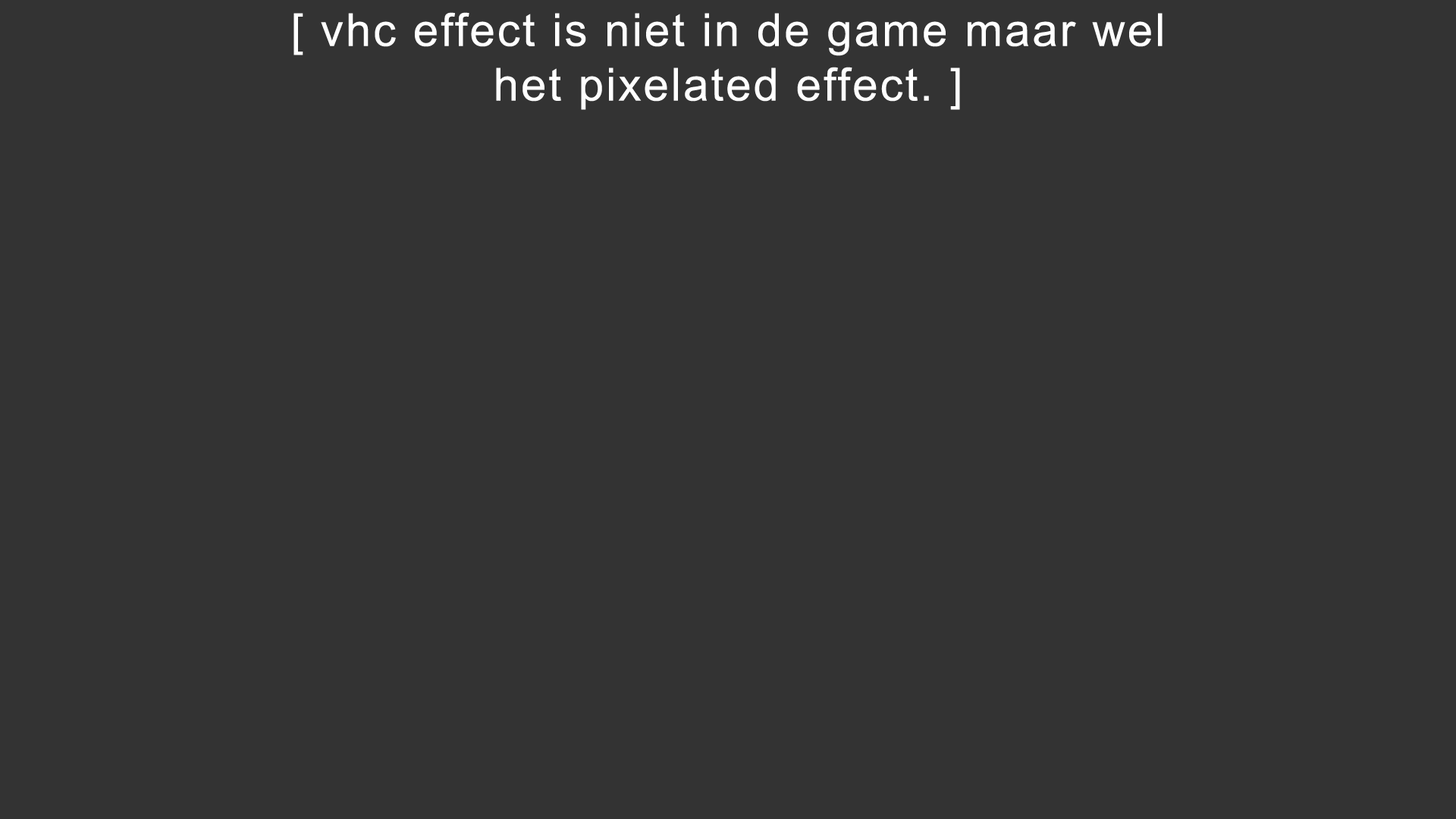
<style>
.page{position:relative;width:1456px;height:819px;background:#333333}
.page>*{position:absolute;margin:0}
.t1{font:45.5px "ArialMT";letter-spacing:0.05em;color:#ffffff}
</style>
<div class="page">
<p class="t1" style="left:293px;top:12px;width:870px;height:98px;text-align:center">[ vhc effect is niet in de game maar wel <br>het pixelated effect. ]</p>
</div>
